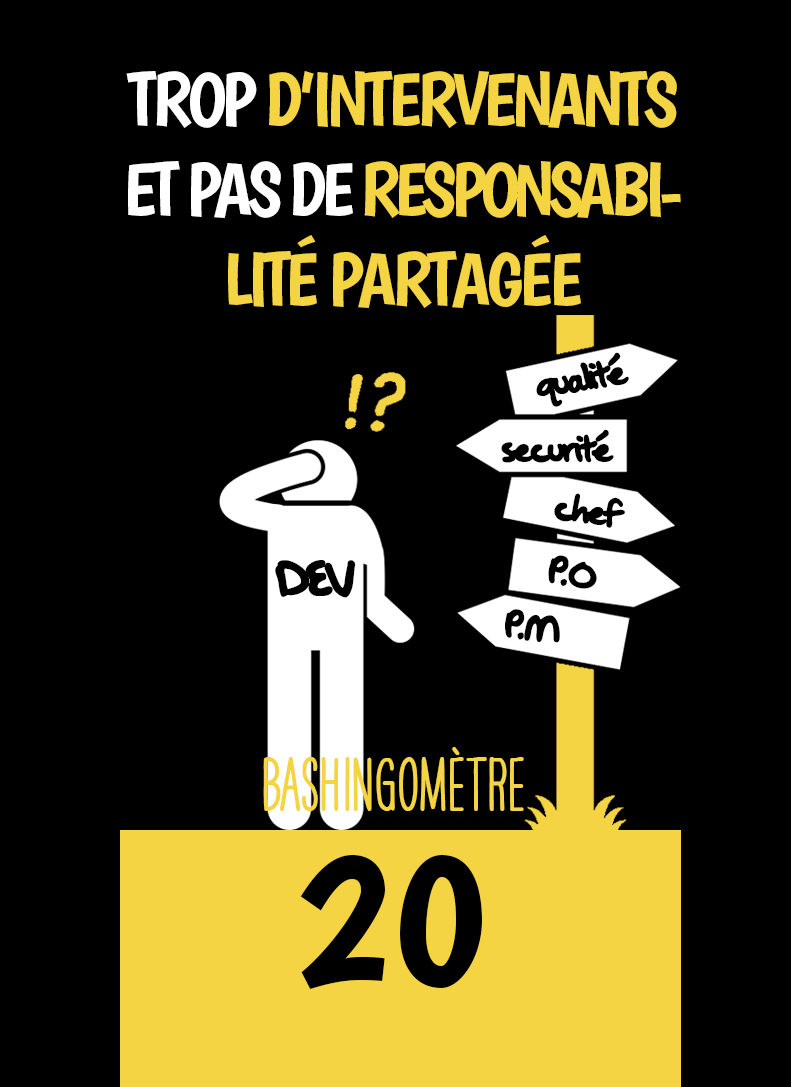
<style>
.page{position:relative;width:791px;height:1087px;background:#000000}
.page>*{position:absolute;margin:0}
.t1{font:75px "Boogaloo-Regular";letter-spacing:-0.06em;color:#f4d443}
.t2{font:75px "Boogaloo-Regular";letter-spacing:-0.06em;color:#ffffff}
.t3{font:75px "Boogaloo-Regular";letter-spacing:-0.08em;color:#ffffff}
.t4{font:75px "Boogaloo-Regular";letter-spacing:-0.08em;color:#f4d443}
.t5{font:75px "Boogaloo-Regular";letter-spacing:-0.04em;color:#f4d443}
.t6{font:45.8px "OakStreetW01-Regular";letter-spacing:-0.08em;color:#000000}
.t7{font:58.3px "OakStreetW01-Regular";letter-spacing:-0.08em;color:#000000}
.t8{font:66.7px "HAVEANICEDAYTallW04-Bold";color:#f4d443}
.t9{font:200px "Boogaloo-Regular";color:#000000}
</style>
<div class="page">
<p class="t1" style="left:126px;top:71px;width:555px;height:237px;text-align:center"><span class="t2">TROP </span>D’INTERVENANTS <span class="t3">ET PAS DE </span><span class="t4">RESPONSABILIT</span>É PARTAG<span class="t5">É</span>E</p>
<p class="t6" style="left:536px;top:352px;width:93px;height:55px;rotate:-10deg">qualité</p>
<p class="t6" style="left:501px;top:429px;width:113px;height:34px">securité</p>
<p class="t6" style="left:554px;top:493px;width:71px;height:35px;rotate:9deg">chef</p>
<p class="t6" style="left:548px;top:555px;width:49px;height:34px;rotate:14deg">P.O</p>
<p class="t7" style="left:275px;top:560px;width:81px;height:38px">DEV</p>
<p class="t6" style="left:505px;top:609px;width:55px;height:34px;rotate:9deg">P.M</p>
<p class="t8" style="left:263px;top:747px;width:261px;height:64px">BASHINgomètre</p>
<p class="t9" style="left:300px;top:855px;width:182px;height:134px">20</p>
</div>
